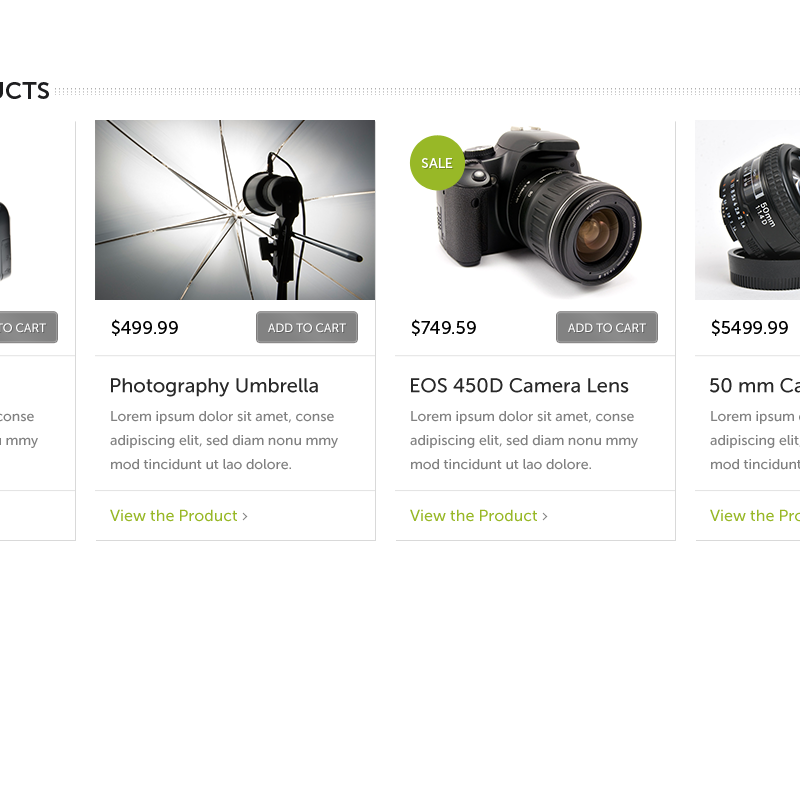
<style>
.page{position:relative;width:800px;height:800px;background:#ffffff}
.page>*{position:absolute;margin:0}
.t1{font:14px "MuseoSans-500";color:#ffffff}
.t2{font:18px "MuseoSans-500";color:#000000}
.t3{font:12px "MuseoSans-500";color:#ffffff}
.t4{font:20px "MuseoSans-500";color:#282828}
.t5{font:14px/24px "MuseoSans-500";color:#808080}
.t6{font:16px "MuseoSans-500";color:#98b827}
</style>
<div class="page">
<p class="t1" style="left:421px;top:158px;width:32px;height:10px">SALE</p>
<p class="t2" style="left:111px;top:319px;width:67px;height:17px">$499.99</p>
<p class="t3" style="left:268px;top:323px;width:78px;height:10px">ADD TO CART</p>
<p class="t2" style="left:411px;top:319px;width:65px;height:17px">$749.59</p>
<p class="t3" style="left:568px;top:323px;width:78px;height:10px">ADD TO CART</p>
<p class="t2" style="left:711px;top:319px;width:77px;height:17px">$5499.99</p>
<p class="t4" style="left:111px;top:378px;width:207px;height:19px">Photography Umbrella</p>
<p class="t4" style="left:411px;top:378px;width:218px;height:15px">EOS 450D Camera Lens</p>
<p class="t5" style="left:110px;top:411px;width:228px;height:59px">Lorem ipsum dolor sit amet, conse  <br>adipiscing elit, sed diam nonu mmy  <br>mod tincidunt ut lao dolore.</p>
<p class="t5" style="left:410px;top:411px;width:228px;height:59px">Lorem ipsum dolor sit amet, conse  <br>adipiscing elit, sed diam nonu mmy  <br>mod tincidunt ut lao dolore.</p>
<p class="t6" style="left:110px;top:509px;width:127px;height:13px">View the Product</p>
<p class="t6" style="left:410px;top:509px;width:127px;height:13px">View the Product</p>
</div>
